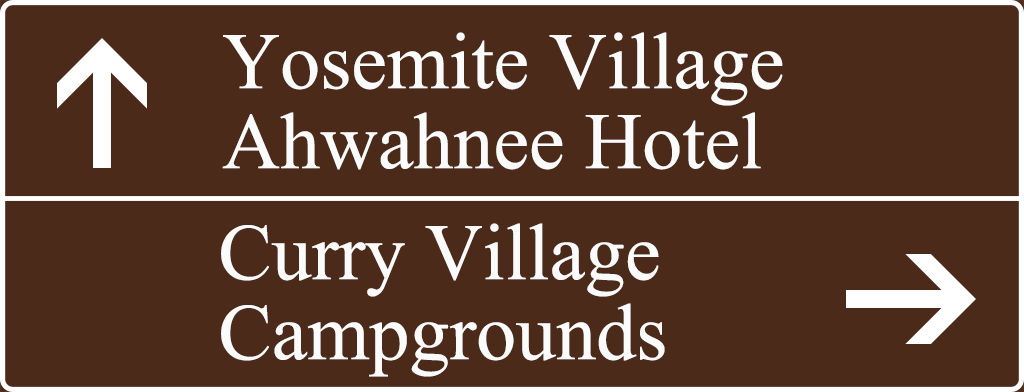
<style>
.page{position:relative;width:1024px;height:392px;background:#4c2a19}
.page>*{position:absolute;margin:0}
.t1{font:80px/80px "IskoolaPota";color:#fbfbfb}
</style>
<div class="page">
<p class="t1" style="left:222px;top:32px;width:561px;height:138px">Yosemite Village<br>Ahwahnee Hotel</p>
<p class="t1" style="left:221px;top:223px;width:444px;height:154px">Curry Village<br>Campgrounds</p>
</div>
